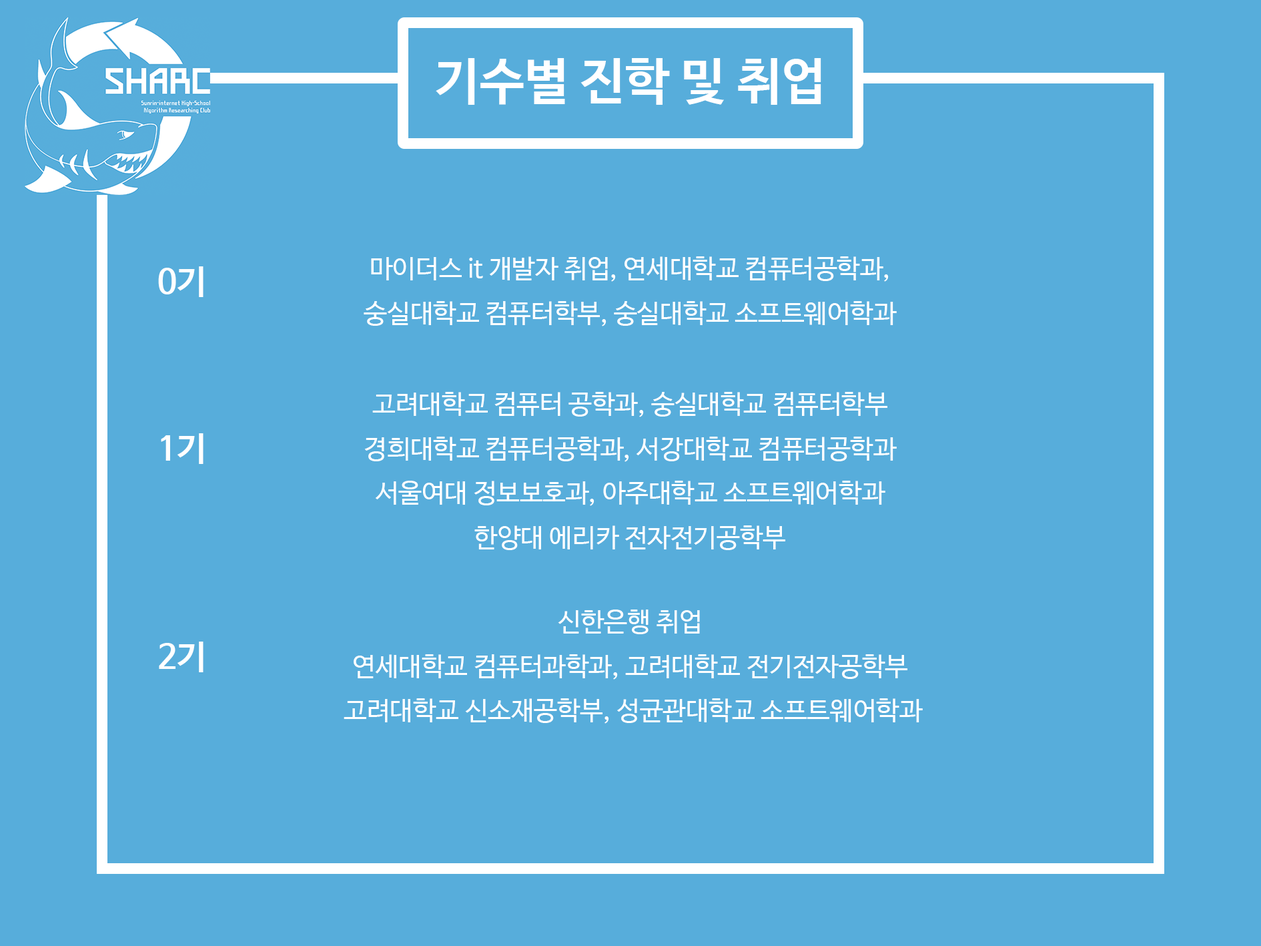
<style>
.page{position:relative;width:1261px;height:946px;background:#57addb}
.page>*{position:absolute;margin:0}
.t1{font:50px "NanumBarunGothicBold";color:#ffffff}
.t2{font:25.9px/44.5px "NanumBarunGothic";color:#ffffff}
.t3{font:33.4px "NanumBarunGothicBold";color:#ffffff}
</style>
<div class="page">
<p class="t1" style="left:436px;top:58px;width:385px;height:47px">기수별 진학 및 취업</p>
<p class="t2" style="left:364px;top:256px;width:533px;height:70px;text-align:center">마이더스 it 개발자 취업, 연세대학교 컴퓨터공학과,<br>숭실대학교 컴퓨터학부, 숭실대학교 소프트웨어학과</p>
<p class="t3" style="left:158px;top:266px;width:46px;height:31px">0기</p>
<p class="t2" style="left:364px;top:392px;width:533px;height:158px;text-align:center">고려대학교 컴퓨터 공학과, 숭실대학교 컴퓨터학부<br>경희대학교 컴퓨터공학과, 서강대학교 컴퓨터공학과 <br>서울여대 정보보호과, 아주대학교 소프트웨어학과<br>한양대 에리카 전자전기공학부</p>
<p class="t3" style="left:161px;top:433px;width:43px;height:31px">1기</p>
<p class="t2" style="left:344px;top:609px;width:579px;height:114px;text-align:center">신한은행 취업<br>연세대학교 컴퓨터과학과, 고려대학교 전기전자공학부<br> 고려대학교 신소재공학부, 성균관대학교 소프트웨어학과</p>
<p class="t3" style="left:159px;top:641px;width:45px;height:31px">2기</p>
</div>
